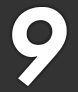
<style>
.page{position:relative;width:78px;height:92px;background:#333333}
.page>*{position:absolute;margin:0}
.t1{font:109.6px "ProductSans-BoldItalic";color:#ffffff}
</style>
<div class="page">
<p class="t1" style="left:12px;top:7px;width:55px;height:79px">9</p>
</div>
